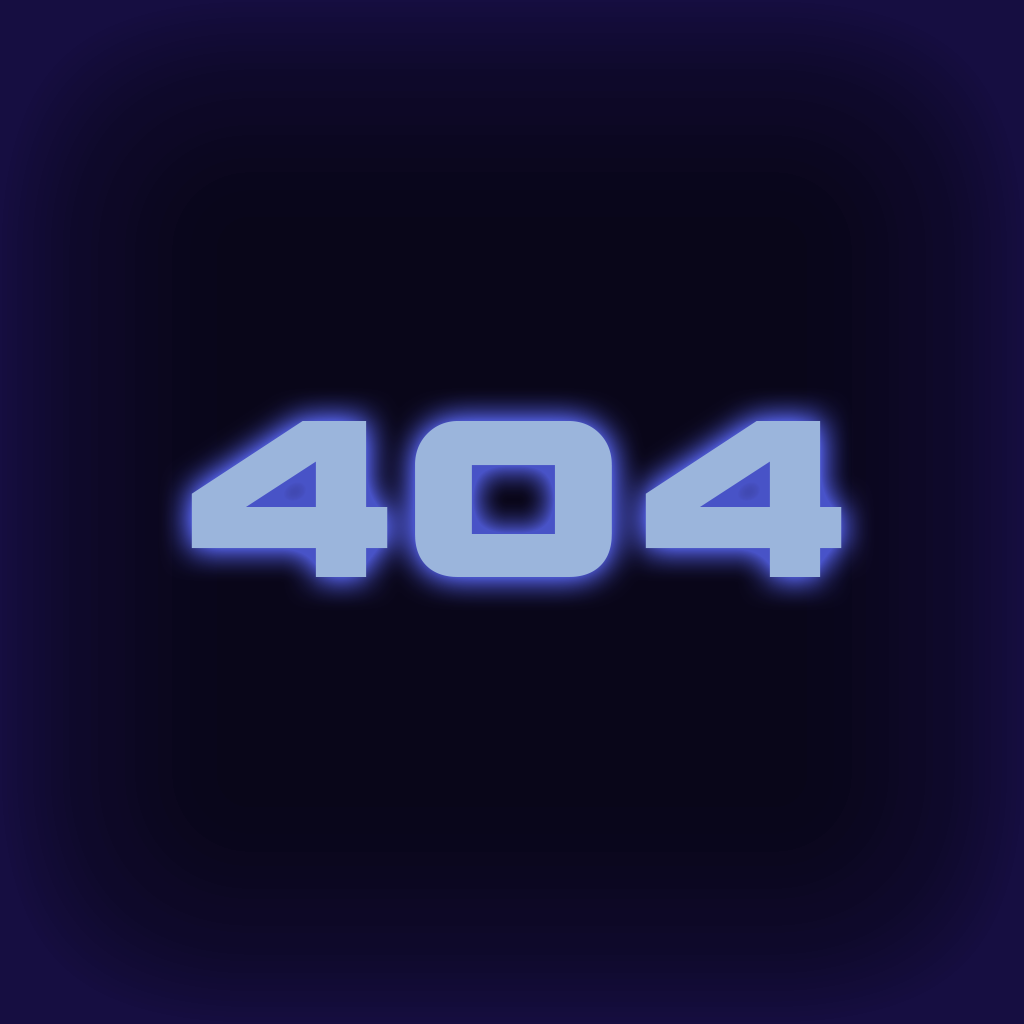
<style>
.page{position:relative;width:1024px;height:1024px;background:#090619}
.page>*{position:absolute;margin:0}
.t1{font:220px "Accent";color:#9bb5dc;text-transform:uppercase}
</style>
<div class="page">
<p class="t1" style="left:191px;top:421px;width:651px;height:156px">404</p>
</div>
